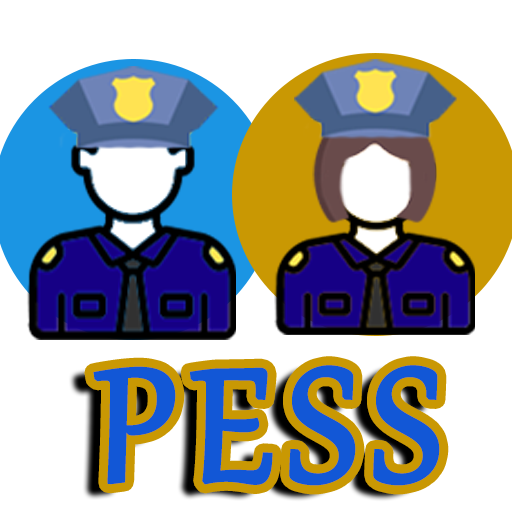
<style>
.page{position:relative;width:512px;height:512px;background:#ffffff}
.page>*{position:absolute;margin:0}
.t1{font:195px "Gabriola";letter-spacing:0.05em;color:#1257d6;font-weight:bold}
</style>
<div class="page">
<p class="t1" style="left:93px;top:365px;width:347px;height:121px">PESS</p>
</div>
